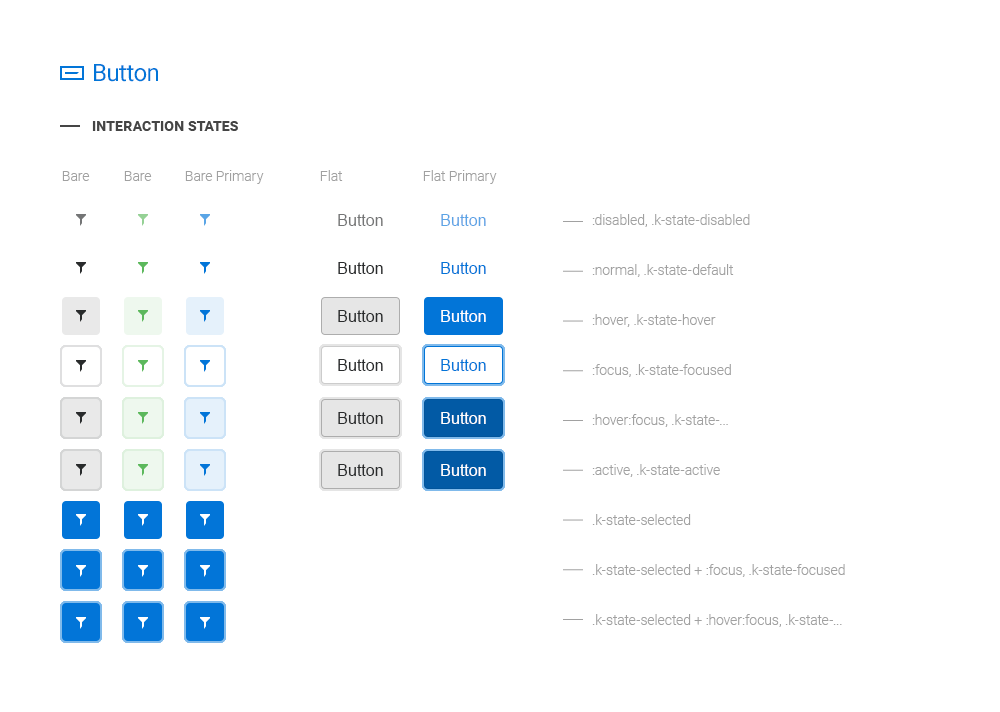
<style>
.page{position:relative;width:1000px;height:712px;background:#ffffff}
.page>*{position:absolute;margin:0}
.t1{font:24px "Roboto-Regular";letter-spacing:-0.025em;color:#0275d8}
.t2{font:14px "Roboto-Bold";letter-spacing:0.01em;color:#454545;text-transform:uppercase}
.t3{font:14px "Roboto-Light";color:#a1a1a1}
.t4{font:16px "ArialMT";color:#747576}
.t5{font:16px "ArialMT";color:#5aa5e6}
.t6{font:14px/50px "Roboto-Light";color:#a1a1a1}
.t7{font:16px "ArialMT";color:#292b2c}
.t8{font:16px "ArialMT";color:#0275d8}
.t9{font:16px "ArialMT";color:#ffffff}
</style>
<div class="page">
<p class="t1" style="left:94px;top:64px;width:64px;height:18px">Button</p>
<p class="t2" style="left:92px;top:121px;width:146px;height:10px">Interaction states</p>
<p class="t3" style="left:62px;top:171px;width:28px;height:10px">Bare</p>
<p class="t3" style="left:124px;top:171px;width:28px;height:10px">Bare</p>
<p class="t3" style="left:185px;top:170px;width:79px;height:14px">Bare Primary</p>
<p class="t3" style="left:320px;top:170px;width:23px;height:11px">Flat</p>
<p class="t3" style="left:423px;top:170px;width:74px;height:14px">Flat Primary</p>
<p class="t4" style="left:338px;top:214px;width:45px;height:12px">Button</p>
<p class="t5" style="left:441px;top:214px;width:45px;height:12px">Button</p>
<p class="t6" style="left:592px;top:214px;width:253px;height:413px">:disabled, .k-state-disabled<br>:normal, .k-state-default<br>:hover, .k-state-hover<br>:focus, .k-state-focused<br>:hover:focus, .k-state-...<br>:active, .k-state-active<br>.k-state-selected <br>.k-state-selected + :focus, .k-state-focused<br>.k-state-selected + :hover:focus, .k-state-...</p>
<p class="t7" style="left:338px;top:262px;width:45px;height:12px">Button</p>
<p class="t8" style="left:441px;top:262px;width:45px;height:12px">Button</p>
<p class="t7" style="left:338px;top:310px;width:45px;height:12px">Button</p>
<p class="t9" style="left:441px;top:310px;width:45px;height:12px">Button</p>
<p class="t7" style="left:338px;top:359px;width:45px;height:12px">Button</p>
<p class="t8" style="left:441px;top:359px;width:45px;height:12px">Button</p>
<p class="t7" style="left:338px;top:412px;width:45px;height:12px">Button</p>
<p class="t9" style="left:441px;top:412px;width:45px;height:12px">Button</p>
<p class="t7" style="left:338px;top:464px;width:45px;height:12px">Button</p>
<p class="t9" style="left:441px;top:464px;width:45px;height:12px">Button</p>
</div>
